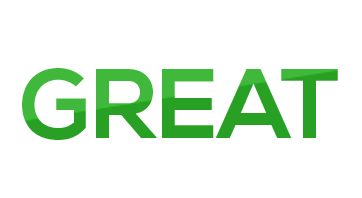
<style>
.page{position:relative;width:362px;height:198px;background:#ffffff}
.page>*{position:absolute;margin:0}
.t1{font:97.8px "NexaBold"}
</style>
<div class="page">
<p class="t1" style="left:22px;top:68px;width:316px;height:72px">GREAT</p>
</div>
